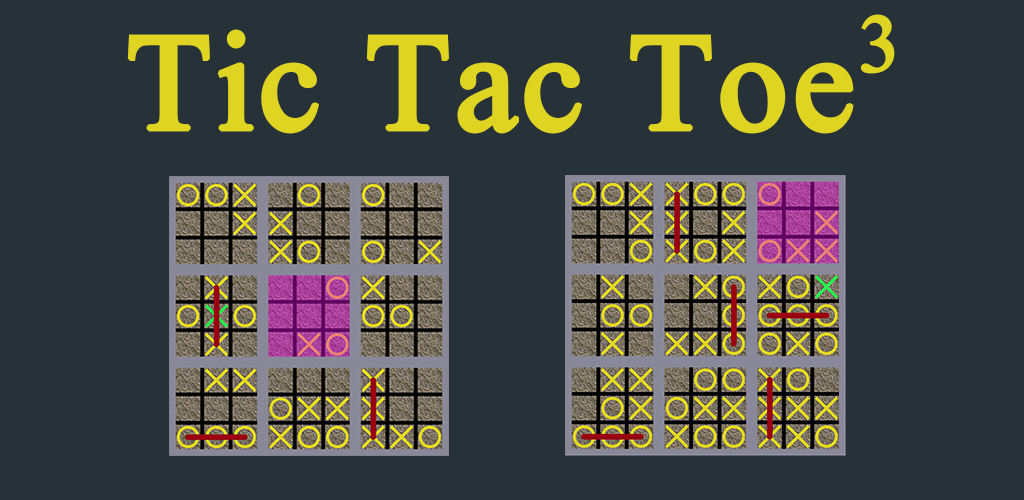
<style>
.page{position:relative;width:1024px;height:500px;background:#263238}
.page>*{position:absolute;margin:0}
.t1{font:173.4px "Aparajita";color:#ded421;font-weight:bold}
</style>
<div class="page">
<p class="t1" style="left:127px;top:14px;width:768px;height:120px">Tic Tac Toe3</p>
</div>
